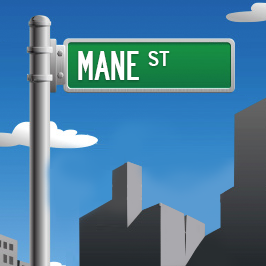
<style>
.page{position:relative;width:266px;height:266px}
.page>*{position:absolute;margin:0}
.t1{font:36px "Roadway";color:#ffffff}
</style>
<div class="page">
<p class="t1" style="left:78px;top:51px;width:92px;height:29px">MANE st</p>
</div>
